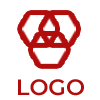
<style>
.page{position:relative;width:100px;height:100px;background:#ffffff}
.page>*{position:absolute;margin:0}
.t1{font:22.3px "Montserrat-SemiBold";color:#b20d0d}
</style>
<div class="page">
<p class="t1" style="left:18px;top:79px;width:66px;height:17px">LOGO</p>
</div>
